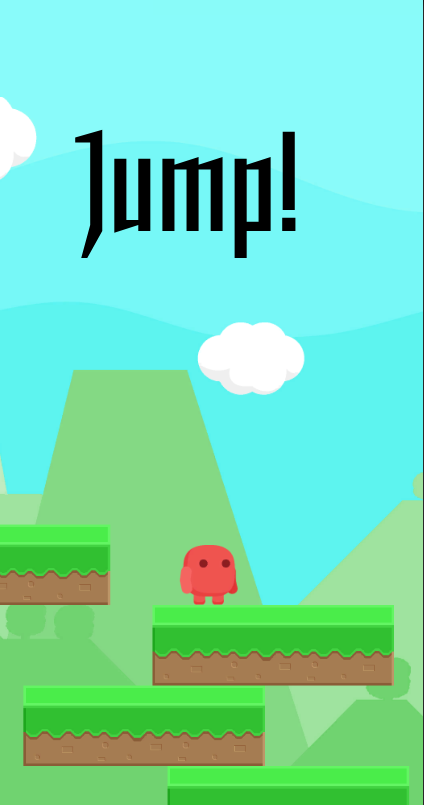
<style>
.page{position:relative;width:424px;height:805px}
.page>*{position:absolute;margin:0}
.t1{font:163px "Daela-Book";color:#000000}
</style>
<div class="page">
<p class="t1" style="left:75px;top:129px;width:221px;height:129px">Jump!</p>
</div>
